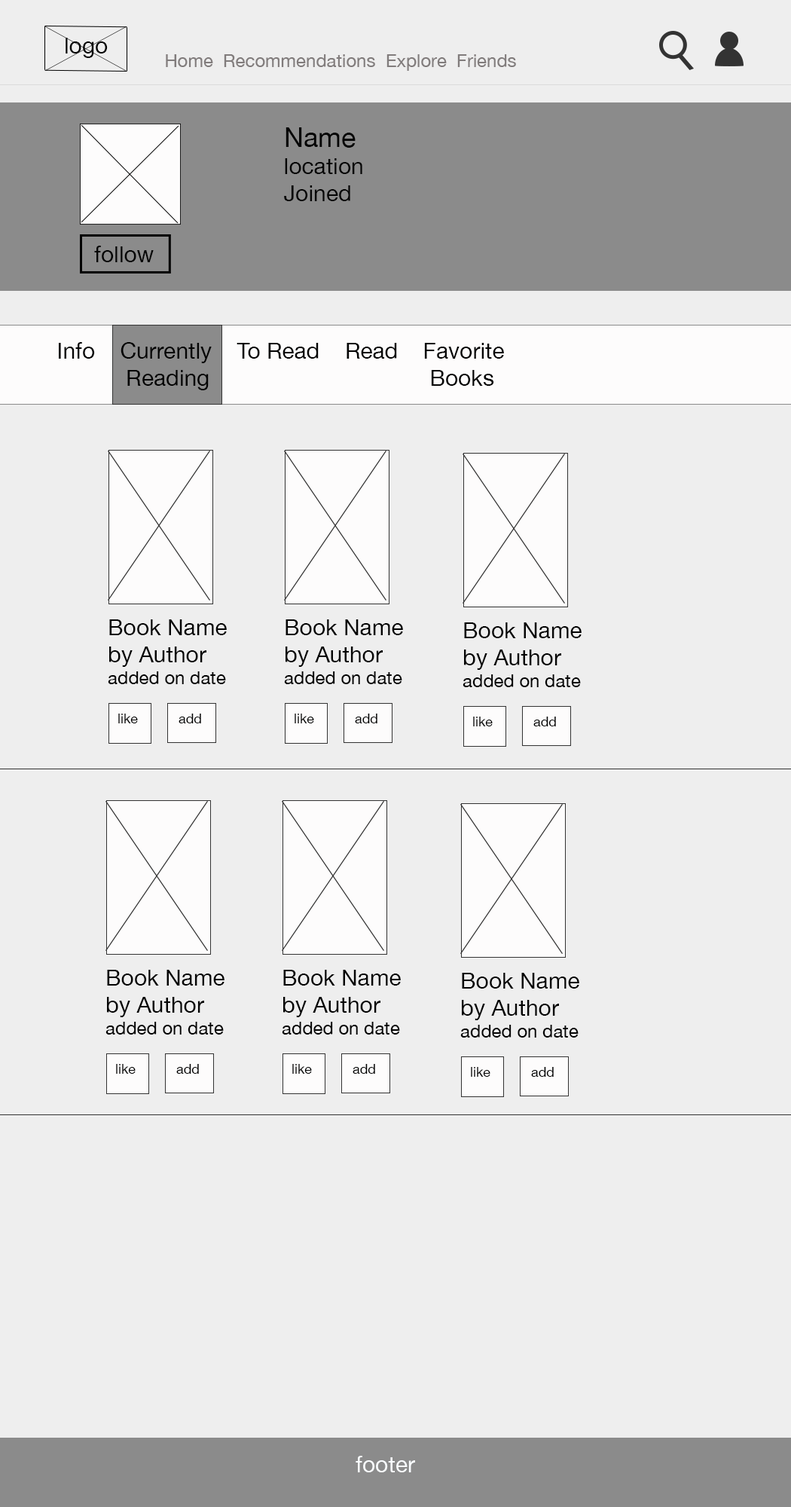
<style>
.page{position:relative;width:791px;height:1507px;background:#eeeeee}
.page>*{position:absolute;margin:0}
.t1{font:22.6px "HelveticaNeue";color:#050505}
.t2{font:18.1px "HelveticaNeue";color:#817c7c}
.t3{font:27.1px "HelveticaNeue";color:#050505}
.t4{font:22.6px "HelveticaNeue";color:#030303}
.t5{font:18.1px "HelveticaNeue";color:#030303}
.t6{font:13.6px "HelveticaNeue";color:#030303}
.t7{font:22.6px "HelveticaNeue";color:#f9fcfe}
</style>
<div class="page">
<p class="t1" style="left:66px;top:38px;width:42px;height:20px">logo</p>
<p class="t2" style="left:166px;top:54px;width:350px;height:17px">Home  Recommendations  Explore  Friends</p>
<p class="t1" style="left:284px;top:127px;width:78px;height:74px"><span class="t3">Name<br></span>location<br>Joined</p>
<p class="t1" style="left:94px;top:246px;width:60px;height:16px">follow</p>
<p class="t4" style="left:59px;top:342px;width:445px;height:48px">Info    Currently    To Read    Read    Favorite<br>           Reading                                   Books</p>
<p class="t4" style="left:108px;top:619px;width:119px;height:65px">Book Name<br>by Author<br><span class="t5">added on date</span></p>
<p class="t4" style="left:284px;top:619px;width:119px;height:65px">Book Name<br>by Author<br><span class="t5">added on date</span></p>
<p class="t4" style="left:463px;top:622px;width:119px;height:65px">Book Name<br>by Author<br><span class="t5">added on date</span></p>
<p class="t6" style="left:118px;top:714px;width:20px;height:9px">like</p>
<p class="t6" style="left:179px;top:714px;width:22px;height:9px">add</p>
<p class="t6" style="left:295px;top:714px;width:19px;height:9px">like</p>
<p class="t6" style="left:355px;top:714px;width:23px;height:9px">add</p>
<p class="t6" style="left:473px;top:717px;width:20px;height:9px">like</p>
<p class="t6" style="left:534px;top:717px;width:22px;height:9px">add</p>
<p class="t4" style="left:105px;top:970px;width:120px;height:65px">Book Name<br>by Author<br><span class="t5">added on date</span></p>
<p class="t4" style="left:282px;top:970px;width:119px;height:65px">Book Name<br>by Author<br><span class="t5">added on date</span></p>
<p class="t4" style="left:460px;top:973px;width:119px;height:65px">Book Name<br>by Author<br><span class="t5">added on date</span></p>
<p class="t6" style="left:116px;top:1064px;width:20px;height:10px">like</p>
<p class="t6" style="left:176px;top:1064px;width:23px;height:10px">add</p>
<p class="t6" style="left:292px;top:1064px;width:20px;height:10px">like</p>
<p class="t6" style="left:353px;top:1064px;width:22px;height:10px">add</p>
<p class="t6" style="left:471px;top:1067px;width:20px;height:10px">like</p>
<p class="t6" style="left:531px;top:1067px;width:23px;height:10px">add</p>
<p class="t7" style="left:356px;top:1456px;width:59px;height:16px">footer</p>
</div>
